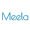
<style>
.page{position:relative;width:30px;height:30px;background:#ffffff}
.page>*{position:absolute;margin:0}
.t1{font:10px "PoiretOne-Regular"}
</style>
<div class="page">
<p class="t1" style="left:2px;top:12px;width:27px;height:9px">Meela</p>
</div>
